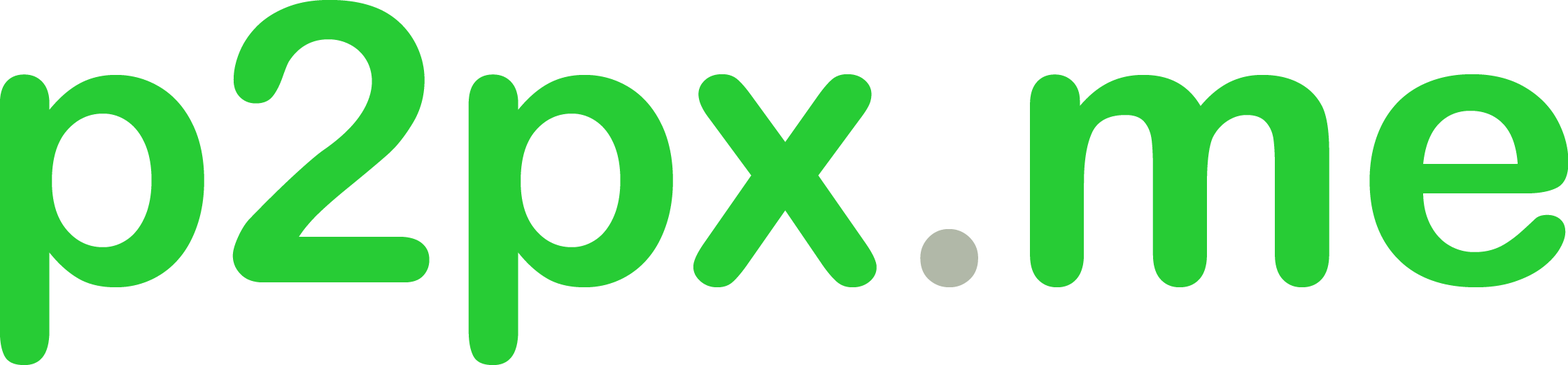
<style>
.page{position:relative;width:1568px;height:365px;background:#ffffff}
.page>*{position:absolute;margin:0}
.t1{font:391.8px "ArialRoundedMTBold";letter-spacing:0.021em;color:#27cc35}
.t2{font:391.8px "ArialRoundedMTBold";letter-spacing:0.021em;color:#b1b8a8}
</style>
<div class="page">
<p class="t1" style="left:0px;top:0px;width:1568px;height:365px">p2px<span class="t2">.</span>me</p>
</div>
